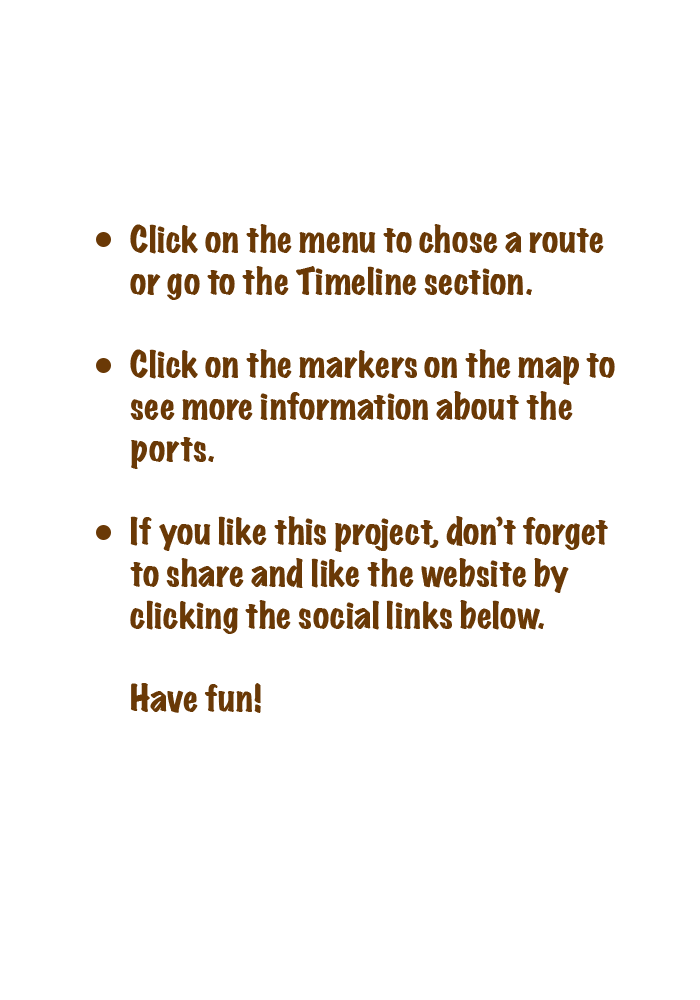
<style>
.page{position:relative;width:700px;height:1000px;background:#ffffff}
.page>*{position:absolute;margin:0}
.t1{font:33.4px/41.8px "MarkerFelt-Wide";letter-spacing:-0.02em;color:#6a3906}
</style>
<div class="page">
<p class="t1" style="left:130px;top:224px;width:485px;height:489px">Click on the menu to chose a route or go to the Timeline section.<br><br>Click on the markers on the map to see more information about the ports.<br><br>If you like this project, don’t forget to share and like the website by clicking the social links below.<br><br>Have fun!</p>
</div>
